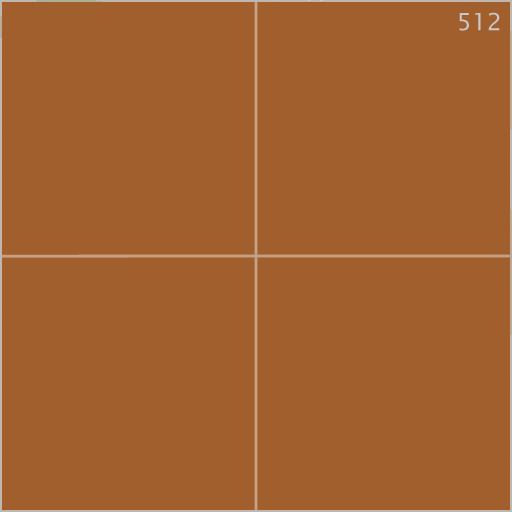
<style>
.page{position:relative;width:512px;height:512px;background:#a25f2e}
.page>*{position:absolute;margin:0}
.t1{font:24px "LucidaSans";color:#c8c8c8;text-transform:uppercase}
</style>
<div class="page">
<p class="t1" style="left:459px;top:12px;width:41px;height:19px">512</p>
</div>
